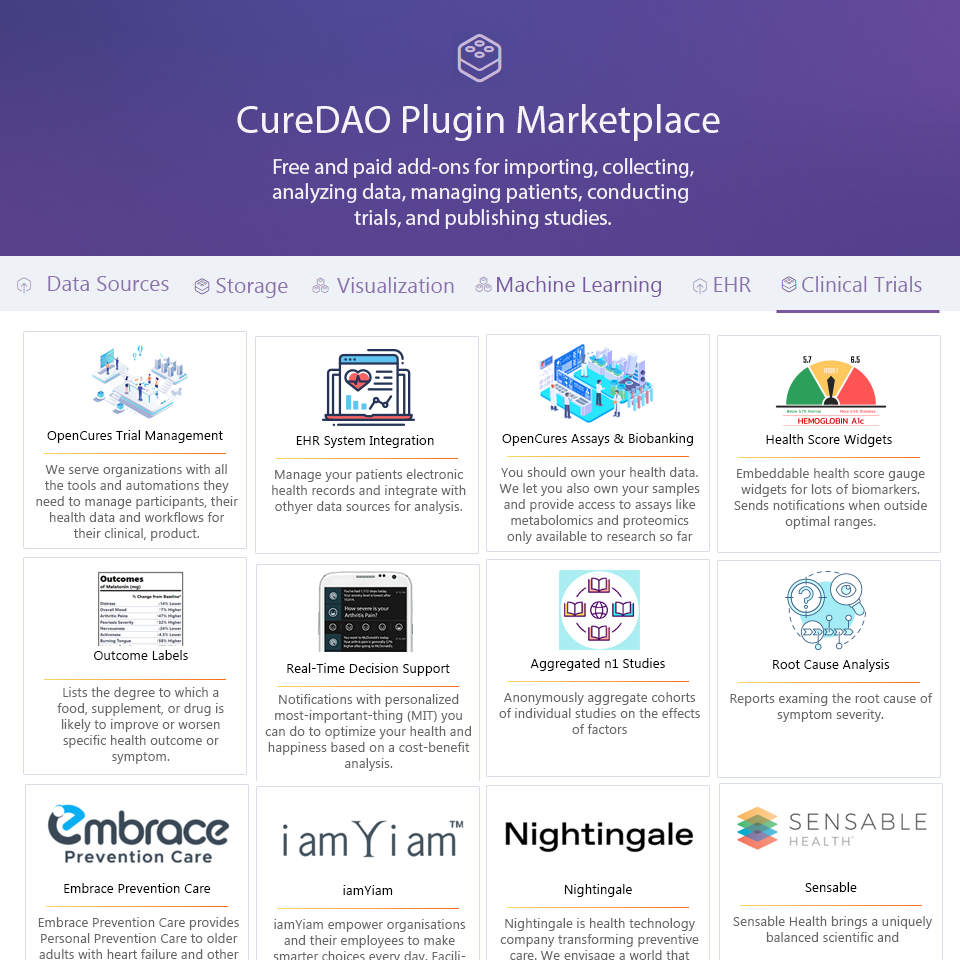
<style>
.page{position:relative;width:960px;height:960px;background:#ffffff}
.page>*{position:absolute;margin:0}
.t1{font:40px "MyriadPro-Regular";color:#f5f3f8}
.t2{font:21.3px "MyriadPro-Regular";color:#f5f3f8}
.t3{font:21.3px "MyanmarText";color:#8b72ac}
.t4{font:21.3px "MyanmarText";color:#79589f}
.t5{font:13.3px "MyanmarText";color:#000000}
.t6{font:13.3px "MyanmarText";color:#676767}
.t7{font:13.3px "MyanmarText";color:#090909}
</style>
<div class="page">
<p class="t1" style="left:237px;top:104px;width:483px;height:37px">CureDAO Plugin Marketplace</p>
<p class="t2" style="left:272px;top:158px;width:422px;height:71px;text-align:center">Free and paid add-ons for importing, collecting,<br>analyzing data, managing patients, conducting <br>trials, and publishing studies.</p>
<p class="t3" style="left:48px;top:276px;width:121px;height:15px">Data Sources</p>
<p class="t3" style="left:216px;top:278px;width:72px;height:20px">Storage</p>
<p class="t3" style="left:337px;top:277px;width:117px;height:16px">Visualization</p>
<p class="t4" style="left:497px;top:276px;width:164px;height:21px">Machine Learning</p>
<p class="t3" style="left:714px;top:277px;width:37px;height:15px">EHR</p>
<p class="t3" style="left:802px;top:276px;width:120px;height:16px">Clinical Trials</p>
<p class="t5" style="left:47px;top:430px;width:176px;height:13px">OpenCures Trial Management</p>
<p class="t5" style="left:296px;top:435px;width:138px;height:13px">EHR System Integration</p>
<p class="t5" style="left:502px;top:433px;width:191px;height:13px">OpenCures Assays &amp; Biobanking</p>
<p class="t5" style="left:766px;top:434px;width:126px;height:13px">Health Score Widgets</p>
<p class="t6" style="left:36px;top:464px;width:202px;height:77px;text-align:center">We serve organizations with all the tools and automations they need to manage participants, their health data and workflows for their clinical, product.</p>
<p class="t6" style="left:272px;top:469px;width:194px;height:45px;text-align:center">Manage your patients electronic health records and integrate with othyer data sources for analysis.</p>
<p class="t6" style="left:499px;top:467px;width:201px;height:77px;text-align:center">You should own your health data. We let you also own your samples and provide access to assays like metabolomics and proteomics only available to research so far</p>
<p class="t6" style="left:734px;top:468px;width:193px;height:61px;text-align:center">Embeddable health score gauge widgets for lots of biomarkers. Sends notifications when outside optimal ranges.</p>
<p class="t7" style="left:94px;top:650px;width:94px;height:10px">Outcome Labels</p>
<p class="t5" style="left:287px;top:663px;width:163px;height:13px">Real-Time Decision Support</p>
<p class="t5" style="left:530px;top:658px;width:135px;height:13px">Aggregated n1 Studies</p>
<p class="t5" style="left:773px;top:659px;width:117px;height:13px">Root Cause Analysis</p>
<p class="t6" style="left:57px;top:687px;width:167px;height:77px;text-align:center">Lists the degree to which a food, supplement, or drug is likely to improve or worsen specific health outcome or symptom.</p>
<p class="t6" style="left:265px;top:694px;width:206px;height:77px;text-align:center">Notifications with personalized most-important-thing (MIT) you can do to optimize your health and happiness based on a cost-benefit analysis.</p>
<p class="t6" style="left:499px;top:692px;width:201px;height:42px;text-align:center">Anonymously aggregate cohorts of individual studies on the effects of factors</p>
<p class="t6" style="left:730px;top:693px;width:203px;height:29px;text-align:center">Reports examing the root cause of symptom severity.</p>
<p class="t5" style="left:64px;top:883px;width:147px;height:10px">Embrace Prevention Care</p>
<p class="t5" style="left:343px;top:885px;width:50px;height:10px">iamYiam</p>
<p class="t5" style="left:564px;top:884px;width:68px;height:13px">Nightingale</p>
<p class="t5" style="left:805px;top:882px;width:52px;height:10px">Sensable</p>
<p class="t6" style="left:733px;top:916px;width:199px;height:26px;text-align:center">Sensable Health brings a uniquely balanced scientific and</p>
</div>
